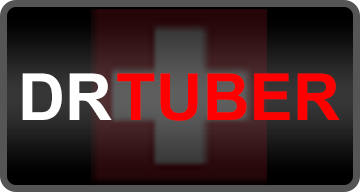
<style>
.page{position:relative;width:360px;height:192px}
.page>*{position:absolute;margin:0}
.t1{font:65px "Arial-BoldMT";color:#ffffff}
.t2{font:65px "Arial-BoldMT";color:#ff0000}
</style>
<div class="page">
<p class="t1" style="left:22px;top:73px;width:90px;height:47px">DR</p>
<p class="t2" style="left:117px;top:73px;width:223px;height:48px">TUBER</p>
</div>
